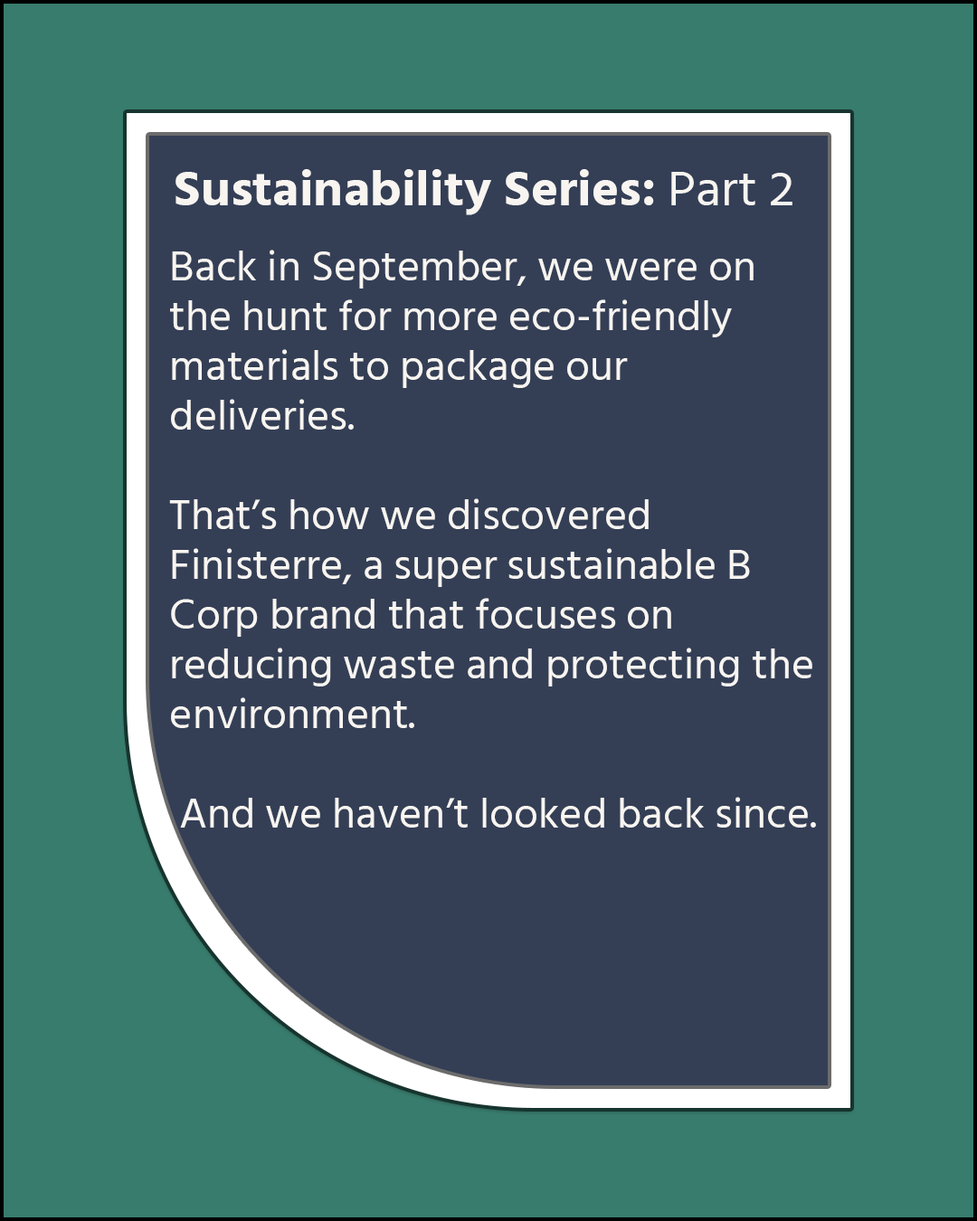
<style>
.page{position:relative;width:977px;height:1221px;background:#387c6d}
.page>*{position:absolute;margin:0}
.t1{font:49px "HindSiliguri-Bold";color:#f8f5f1;scale:1.05 1}
.t2{font:49px "HindSiliguri-Regular";color:#f8f5f1;scale:1.05 1}
.t3{font:41.4px "HindSiliguri-Regular";color:#f8f5f1;scale:1.05 1}
</style>
<div class="page">
<p class="t1" style="left:175px;top:169px;width:617px;height:46px">Sustainability Series:<span class="t2"> Part 2</span></p>
<p class="t3" style="left:169px;top:250px;width:647px;height:577px">Back in September, we were on the hunt for more eco-friendly materials to package our deliveries.<br><br>That’s how we discovered Finisterre, a super sustainable B Corp brand that focuses on reducing waste and protecting the environment.<br><br>And we haven’t looked back since.</p>
</div>
